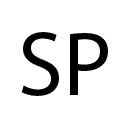
<style>
.page{position:relative;width:128px;height:128px;background:#ffffff}
.page>*{position:absolute;margin:0}
.t1{font:92px "MyriadPro-Regular";color:#000000}
</style>
<div class="page">
<p class="t1" style="left:21px;top:32px;width:87px;height:64px">SP</p>
</div>
